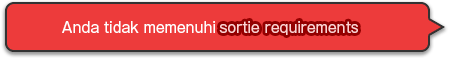
<style>
.page{position:relative;width:450px;height:58px;background:#ed3b3b}
.page>*{position:absolute;margin:0}
.t1{font:14px "GothicMB101Pro-Regular";color:#ffffff}
.t2{font:14px "GothicMB101Pro-Regular";color:#ffd3d3}
</style>
<div class="page">
<p class="t1" style="left:62px;top:21px;width:153px;height:12px">Anda tidak memenuhi</p>
<p class="t1" style="left:69px;top:21px;width:293px;height:14px">You do not meet the <span class="t2">sortie requirements</span>!</p>
</div>
